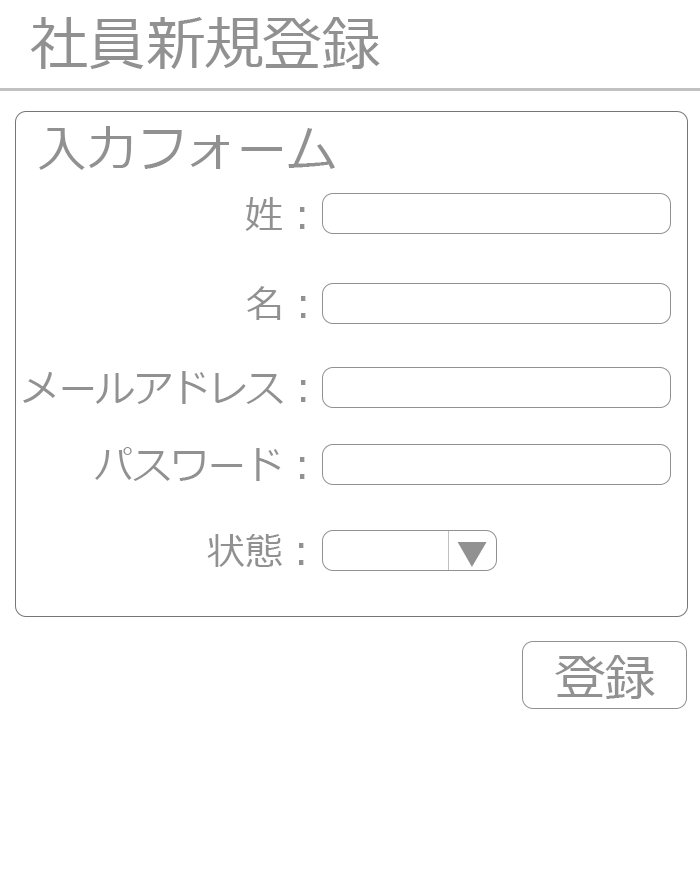
<style>
.page{position:relative;width:700px;height:880px;background:#ffffff}
.page>*{position:absolute;margin:0}
.t1{font:50px "Meiryo";color:#919191}
.t2{font:37.5px "Meiryo";color:#919191}
.t3{font:12px "Meiryo";color:#919191}
</style>
<div class="page">
<p class="t1" style="left:39px;top:126px;width:296px;height:44px">入力フォーム</p>
<p class="t2" style="left:245px;top:197px;width:60px;height:34px">姓：</p>
<p class="t2" style="left:247px;top:286px;width:59px;height:34px">名：</p>
<p class="t2" style="left:23px;top:371px;width:283px;height:33px">メールアドレス：</p>
<p class="t2" style="left:95px;top:447px;width:210px;height:34px">パスワード：</p>
<p class="t2" style="left:207px;top:534px;width:97px;height:33px">状態：</p>
<p class="t2" style="left:457px;top:542px;width:30px;height:25px">▼</p>
<p class="t3" style="left:555px;top:655px;width:100px;height:44px">登録</p>
</div>
